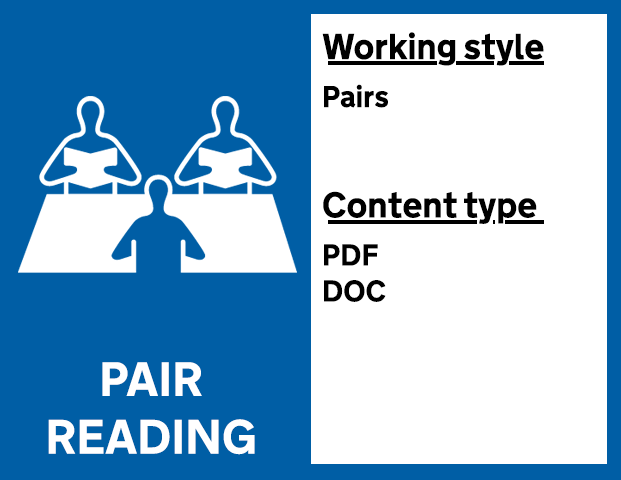
<style>
.page{position:relative;width:621px;height:480px;background:#ffffff}
.page>*{position:absolute;margin:0}
.t1{font:36px "NTA-Bold";color:#000000}
.t2{font:30px "NTA-Bold";color:#000000}
.t3{font:48px "NTA-Bold";color:#ffffff}
</style>
<div class="page">
<p class="t1" style="left:322px;top:32px;width:222px;height:270px">Working style<br><span class="t2">Pairs<br></span><br>Content type<br><span class="t2">PDF<br>DOC</span></p>
<p class="t3" style="left:48px;top:362px;width:207px;height:93px;text-align:center">PAIR<br>READING</p>
</div>
